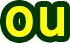
<style>
.page{position:relative;width:70px;height:44px;background:#003600}
.page>*{position:absolute;margin:0}
.t1{font:52px "RodinPro-B";letter-spacing:0.06em;color:#feff00;scale:0.9 1}
</style>
<div class="page">
<p class="t1" style="left:6px;top:6px;width:58px;height:31px">ou</p>
</div>
